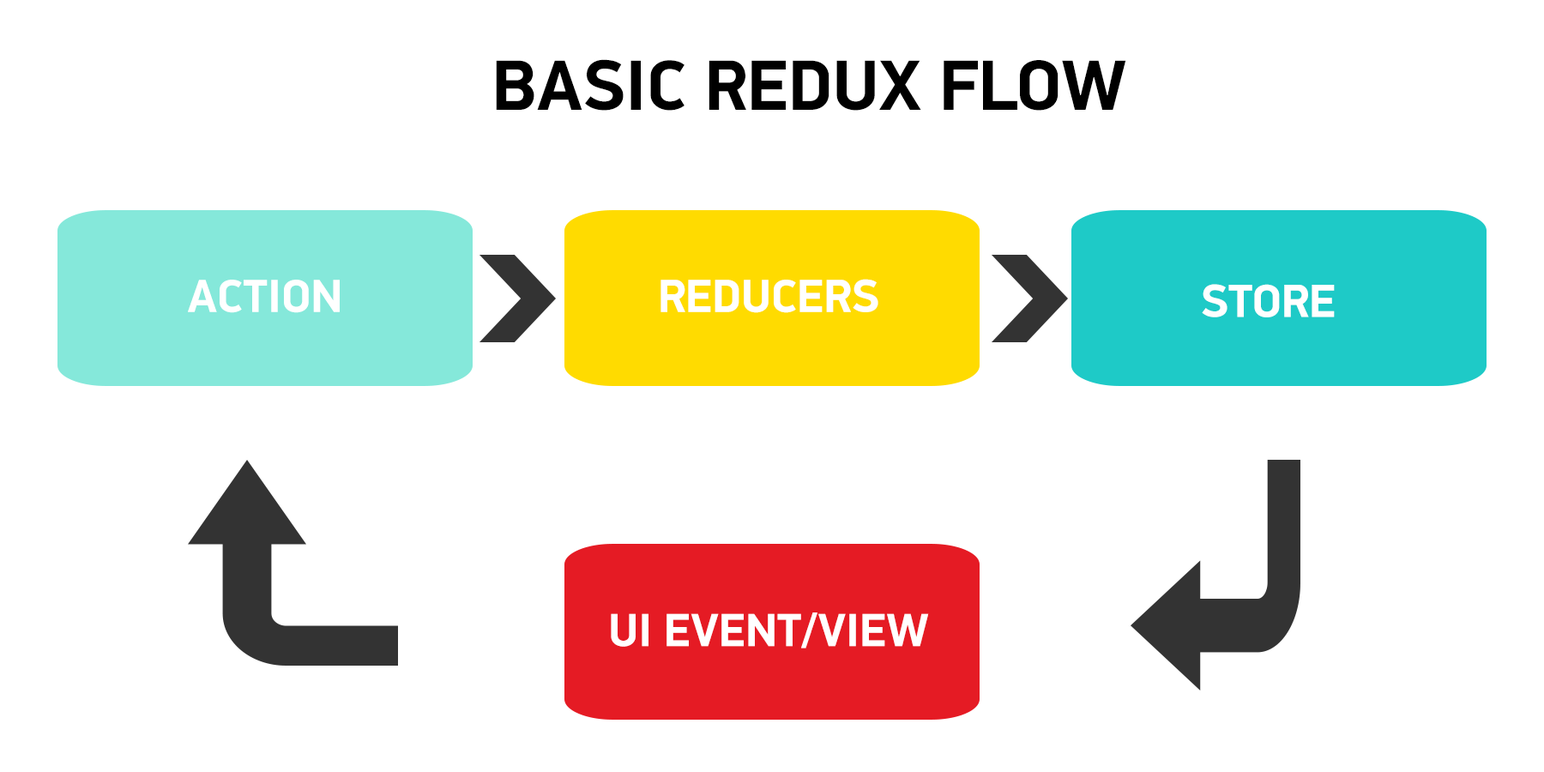
<style>
.page{position:relative;width:1544px;height:772px;background:#ffffff}
.page>*{position:absolute;margin:0}
.t1{font:71.5px "PFDinDisplayPro-Bold";color:#000000}
.t2{font:46.5px "PFDinDisplayPro-Bold";color:#ffffff}
</style>
<div class="page">
<p class="t1" style="left:496px;top:59px;width:630px;height:52px">BASIC REDUX FLOW</p>
<p class="t2" style="left:188px;top:280px;width:152px;height:33px">ACTION</p>
<p class="t2" style="left:661px;top:279px;width:218px;height:34px">REDUCERS</p>
<p class="t2" style="left:1202px;top:284px;width:133px;height:33px">STORE</p>
<p class="t2" style="left:611px;top:613px;width:318px;height:36px">UI EVENT/VIEW</p>
</div>
